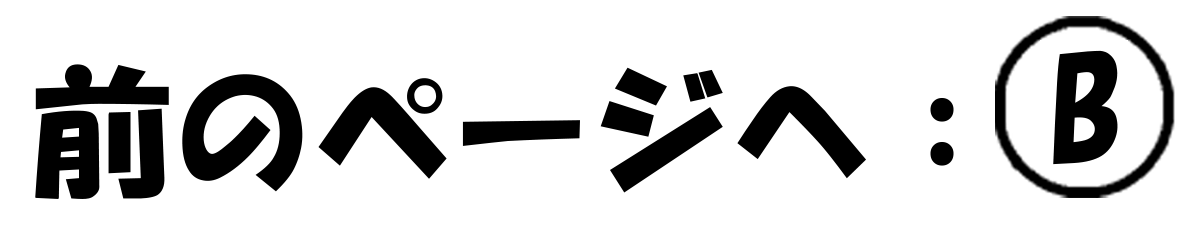
<style>
.page{position:relative;width:1200px;height:248px;background:#ffffff}
.page>*{position:absolute;margin:0}
.t1{font:140px "HGSoeiKakupoptai";color:#000000}
</style>
<div class="page">
<p class="t1" style="left:1053px;top:50px;width:65px;height:115px">B</p>
<p class="t1" style="left:35px;top:64px;width:919px;height:135px">前のページへ：</p>
</div>
